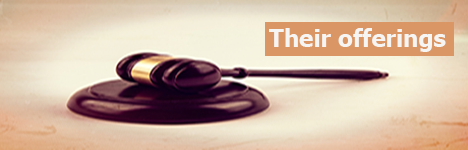
<style>
.page{position:relative;width:468px;height:150px}
.page>*{position:absolute;margin:0}
.t1{font:24px "Tahoma-Bold";color:#f7f5f3}
</style>
<div class="page">
<p class="t1" style="left:269px;top:28px;width:177px;height:24px">Their offerings</p>
</div>
